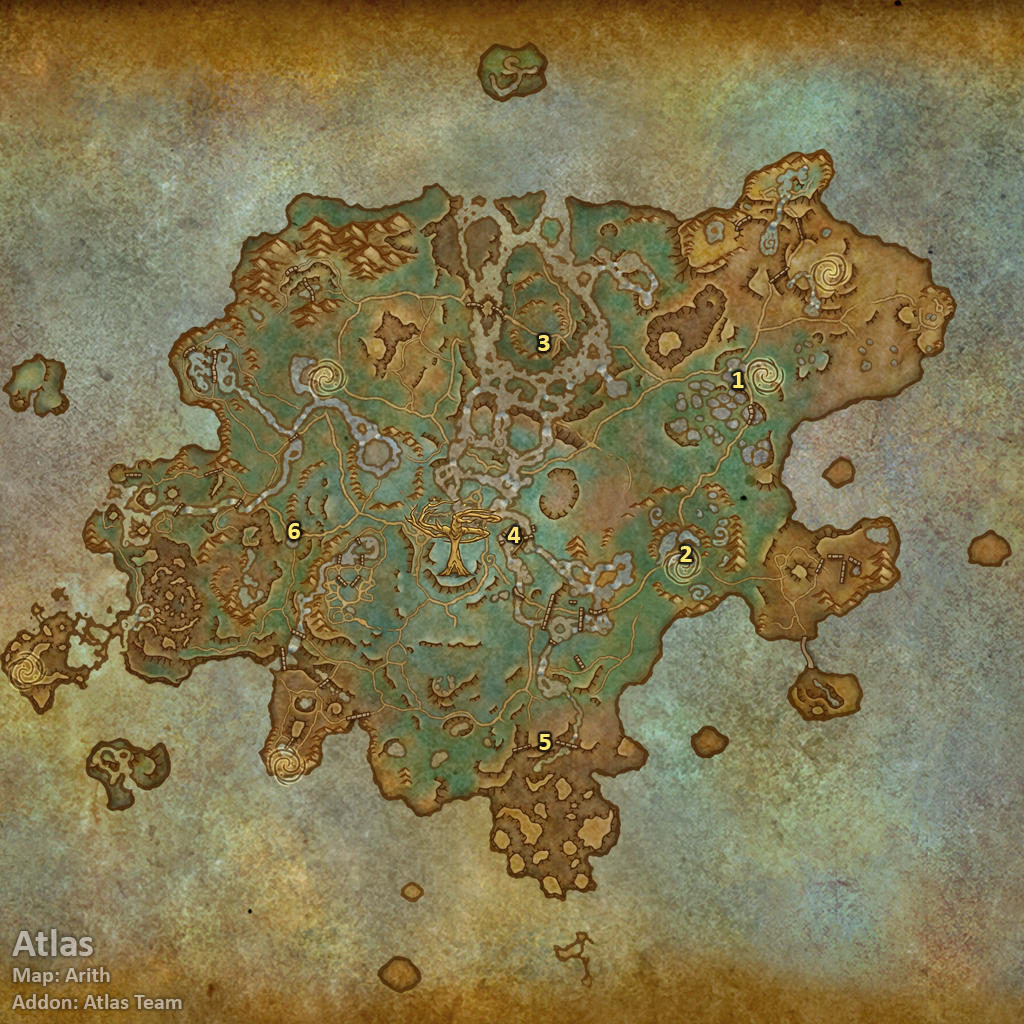
<style>
.page{position:relative;width:1024px;height:1024px}
.page>*{position:absolute;margin:0}
.t1{font:26px "Calibri-Bold";color:#fee570}
.t2{font:22px "Calibri-Bold";color:#baae9b}
.t3{font:40px "Calibri-Bold";color:#baae9b}
</style>
<div class="page">
<p class="t1" style="left:538px;top:335px;width:12px;height:16px">3</p>
<p class="t1" style="left:733px;top:372px;width:11px;height:16px">1</p>
<p class="t1" style="left:288px;top:523px;width:12px;height:16px">6</p>
<p class="t1" style="left:507px;top:527px;width:14px;height:16px">4</p>
<p class="t1" style="left:680px;top:546px;width:12px;height:16px">2</p>
<p class="t1" style="left:539px;top:734px;width:12px;height:16px">5</p>
<p class="t2" style="left:12px;top:929px;width:170px;height:80px"><span class="t3">Atlas<br></span>Map: Arith<br>Addon: Atlas Team</p>
</div>
